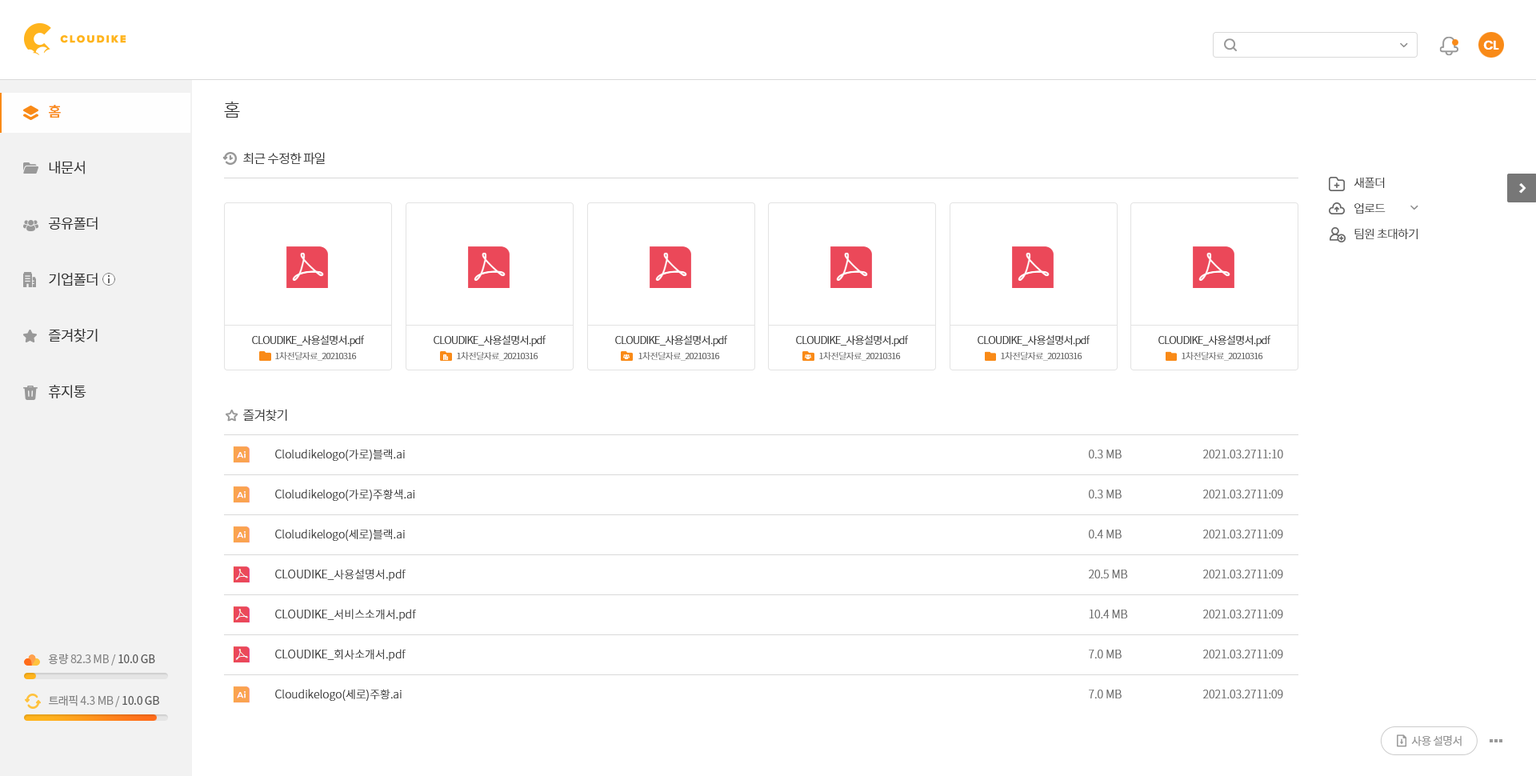
<style>
.page{position:relative;width:1536px;height:776px;background:#ffffff}
.page>*{position:absolute;margin:0}
.t1{font:12.8px "Poppins-SemiBold";letter-spacing:-0.05em;color:#ffffff}
.t2{font:18.4px "NotoSansCJKkr-Light";letter-spacing:-0.05em;color:#333333}
.t3{font:14.4px/56px "NotoSansCJKkr-DemiLight";letter-spacing:-0.05em;color:#333333}
.t4{font:14.4px/56px "NotoSansCJKkr-Medium";letter-spacing:-0.05em;color:#f98a17}
.t5{font:12.8px "NotoSansCJKkr-Light";letter-spacing:-0.05em;color:#333333}
.t6{font:12px/25.6px "NotoSansCJKkr-Light";letter-spacing:-0.05em;color:#333333}
.t7{font:10.4px "NotoSansCJKkr-Light";letter-spacing:-0.05em;color:#333333}
.t8{font:8.8px "NotoSansCJKkr-Light";letter-spacing:-0.05em;color:#666666}
.t9{font:11.2px/40px "NotoSansCJKkr-Light";color:#333333}
.t10{font:11.2px/40px "NotoSansCJKkr-Light";color:#666666}
.t11{font:11.2px "NotoSansCJKkr-Regular";letter-spacing:-0.025em;color:#888888}
.t12{font:11.2px "NotoSansCJKkr-Regular";letter-spacing:-0.025em;color:#585858}
.t13{font:11.2px "NotoSansCJKkr-Regular";letter-spacing:-0.05em;color:#999999}
</style>
<div class="page">
<p class="t1" style="left:1484px;top:40px;width:16px;height:10px">CL</p>
<p class="t2" style="left:224px;top:101px;width:16px;height:17px">홈</p>
<p class="t3" style="left:49px;top:105px;width:49px;height:293px"><span class="t4">홈<br></span>내문서<br>공유폴더<br>기업폴더<br>즐겨찾기<br>휴지통</p>
<p class="t5" style="left:243px;top:152px;width:82px;height:13px">최근 수정한 파일</p>
<p class="t6" style="left:1354px;top:177px;width:64px;height:62px">새폴더<br>업로드<br>팀원 초대하기</p>
<p class="t7" style="left:252px;top:335px;width:113px;height:11px">CLOUDIKE_사용설명서.pdf</p>
<p class="t7" style="left:434px;top:335px;width:113px;height:11px">CLOUDIKE_사용설명서.pdf</p>
<p class="t7" style="left:615px;top:335px;width:113px;height:11px">CLOUDIKE_사용설명서.pdf</p>
<p class="t7" style="left:796px;top:335px;width:113px;height:11px">CLOUDIKE_사용설명서.pdf</p>
<p class="t7" style="left:978px;top:335px;width:113px;height:11px">CLOUDIKE_사용설명서.pdf</p>
<p class="t7" style="left:1159px;top:335px;width:112px;height:11px">CLOUDIKE_사용설명서.pdf</p>
<p class="t8" style="left:275px;top:351px;width:82px;height:10px">1차전달자료_20210316</p>
<p class="t8" style="left:457px;top:351px;width:82px;height:10px">1차전달자료_20210316</p>
<p class="t8" style="left:639px;top:351px;width:81px;height:10px">1차전달자료_20210316</p>
<p class="t8" style="left:819px;top:351px;width:82px;height:10px">1차전달자료_20210316</p>
<p class="t8" style="left:1001px;top:351px;width:82px;height:10px">1차전달자료_20210316</p>
<p class="t8" style="left:1182px;top:351px;width:81px;height:10px">1차전달자료_20210316</p>
<p class="t5" style="left:243px;top:409px;width:44px;height:13px">즐겨찾기</p>
<p class="t9" style="left:275px;top:449px;width:141px;height:252px">Cloludikelogo(가로)블랙.ai<br>Cloludikelogo(가로)주황색.ai<br>Cloludikelogo(세로)블랙.ai<br>CLOUDIKE_사용설명서.pdf<br>CLOUDIKE_서비스소개서.pdf<br>CLOUDIKE_회사소개서.pdf<br>Cloudikelogo(세로)주황.ai</p>
<p class="t10" style="left:1089px;top:450px;width:39px;height:249px">0.3 MB<br>0.3 MB<br>0.4 MB<br>20.5 MB<br>10.4 MB<br>7.0 MB<br>7.0 MB</p>
<p class="t10" style="left:1203px;top:450px;width:80px;height:249px">2021.03.2711:10<br>2021.03.2711:09<br>2021.03.2711:09<br>2021.03.2711:09<br>2021.03.2711:09<br>2021.03.2711:09<br>2021.03.2711:09</p>
<p class="t11" style="left:48px;top:654px;width:107px;height:12px">용량 82.3 MB / <span class="t12">10.0 GB</span></p>
<p class="t11" style="left:49px;top:695px;width:110px;height:12px">트래픽 4.3 MB / <span class="t12">10.0 GB</span></p>
<p class="t13" style="left:1411px;top:735px;width:51px;height:12px">사용 설명서</p>
</div>
